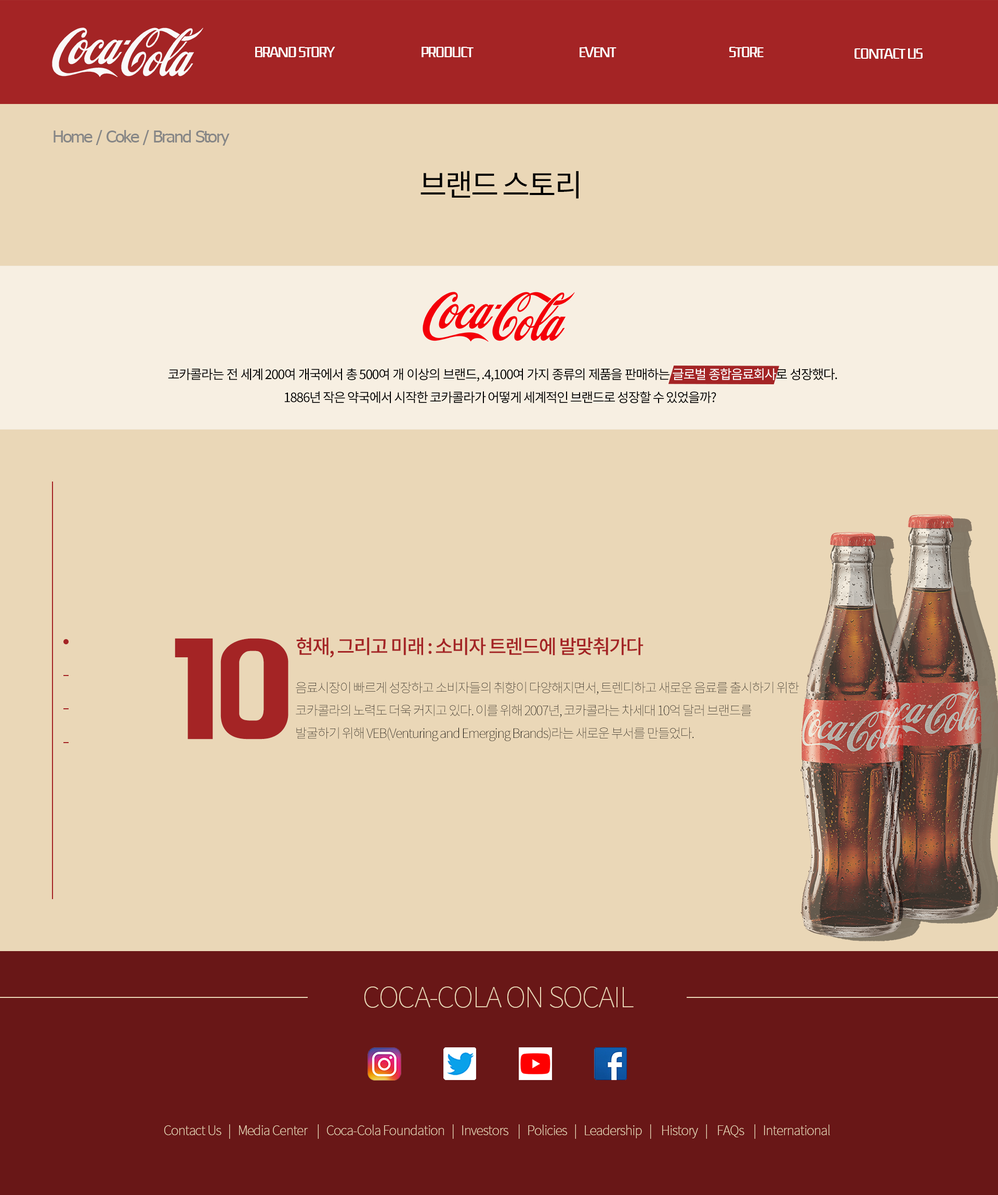
<style>
.page{position:relative;width:998px;height:1195px;background:#ead7b7}
.page>*{position:absolute;margin:0}
.t1{font:13px "MapoDPP";letter-spacing:-0.08em;color:#ffffff}
.t2{font:17.3px "LIBRARY_k";letter-spacing:-0.08em;color:#868686}
.t3{font:30.3px "NotoSansKR-Regular";letter-spacing:-0.06em;color:#000000}
.t4{font:13px "NotoSansKR-Regular";letter-spacing:-0.06em;color:#000000}
.t5{font:13px "NotoSansKR-Regular";letter-spacing:-0.06em;color:#ffffff}
.t6{font:137.5px "BMHANNA11yrsold";letter-spacing:-0.06em;color:#a42425}
.t7{font:19.5px "NotoSansKR-Medium";letter-spacing:-0.06em;color:#a42425}
.t8{font:13px "NotoSansKR-Thin";letter-spacing:-0.06em;color:#000000}
.t9{font:28.2px "NotoSansKR-Thin";letter-spacing:-0.04em;color:#ead7b7}
.t10{font:13px "NotoSansKR-Thin";letter-spacing:-0.04em;color:#ead7b7}
</style>
<div class="page">
<p class="t1" style="left:255px;top:47px;width:80px;height:10px">BRAND STORY</p>
<p class="t1" style="left:422px;top:47px;width:52px;height:10px">PRODUCT</p>
<p class="t1" style="left:580px;top:47px;width:37px;height:10px">EVENT</p>
<p class="t1" style="left:729px;top:47px;width:35px;height:10px">STORE</p>
<p class="t1" style="left:855px;top:48px;width:68px;height:11px">CONTACT US</p>
<p class="t2" style="left:54px;top:130px;width:176px;height:16px">Home / Coke / Brand Story</p>
<p class="t3" style="left:421px;top:171px;width:158px;height:28px">브랜드 스토리</p>
<p class="t4" style="left:168px;top:368px;width:670px;height:14px">코카콜라는 전 세계 200여 개국에서 총 500여 개 이상의 브랜드, .4,100여 가지 종류의 제품을 판매하는 <span class="t5">글로벌 종합음료회사</span>로 성장했다.</p>
<p class="t4" style="left:284px;top:391px;width:432px;height:12px">1886년 작은 약국에서 시작한 코카콜라가 어떻게 세계적인 브랜드로 성장할 수 있었을까?</p>
<p class="t6" style="left:175px;top:638px;width:114px;height:101px">10</p>
<p class="t7" style="left:296px;top:637px;width:348px;height:21px">현재, 그리고 미래 : 소비자 트렌드에 발맞춰가다</p>
<p class="t8" style="left:296px;top:681px;width:503px;height:60px">음료시장이 빠르게 성장하고 소비자들의 취향이 다양해지면서, 트렌디하고 새로운 음료를 출시하기 위한<br>코카콜라의 노력도 더욱 커지고 있다. 이를 위해 2007년, 코카콜라는 차세대 10억 달러 브랜드를<br>발굴하기 위해 VEB(Venturing and Emerging Brands)라는 새로운 부서를 만들었다.</p>
<p class="t9" style="left:364px;top:986px;width:270px;height:22px">COCA-COLA ON SOCAIL</p>
<p class="t10" style="left:164px;top:1124px;width:666px;height:15px">Contact Us   |   Media Center    |   Coca-Cola Foundation   |   Investors    |   Policies   |   Leadership   |    History   |    FAQs    |   International</p>
</div>
